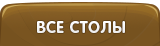
<style>
.page{position:relative;width:160px;height:46px}
.page>*{position:absolute;margin:0}
.t1{font:16px "RotondaC-Bold";letter-spacing:0.04em;color:#ffffff;text-transform:uppercase}
</style>
<div class="page">
<p class="t1" style="left:37px;top:21px;width:88px;height:12px">все столы</p>
</div>
